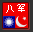
<style>
.page{position:relative;width:33px;height:32px;background:#f20000}
.page>*{position:absolute;margin:0}
.t1{font:10.4px "SimSun";color:#ffffff}
</style>
<div class="page">
<p class="t1" style="left:6px;top:4px;width:19px;height:9px">八军</p>
</div>
